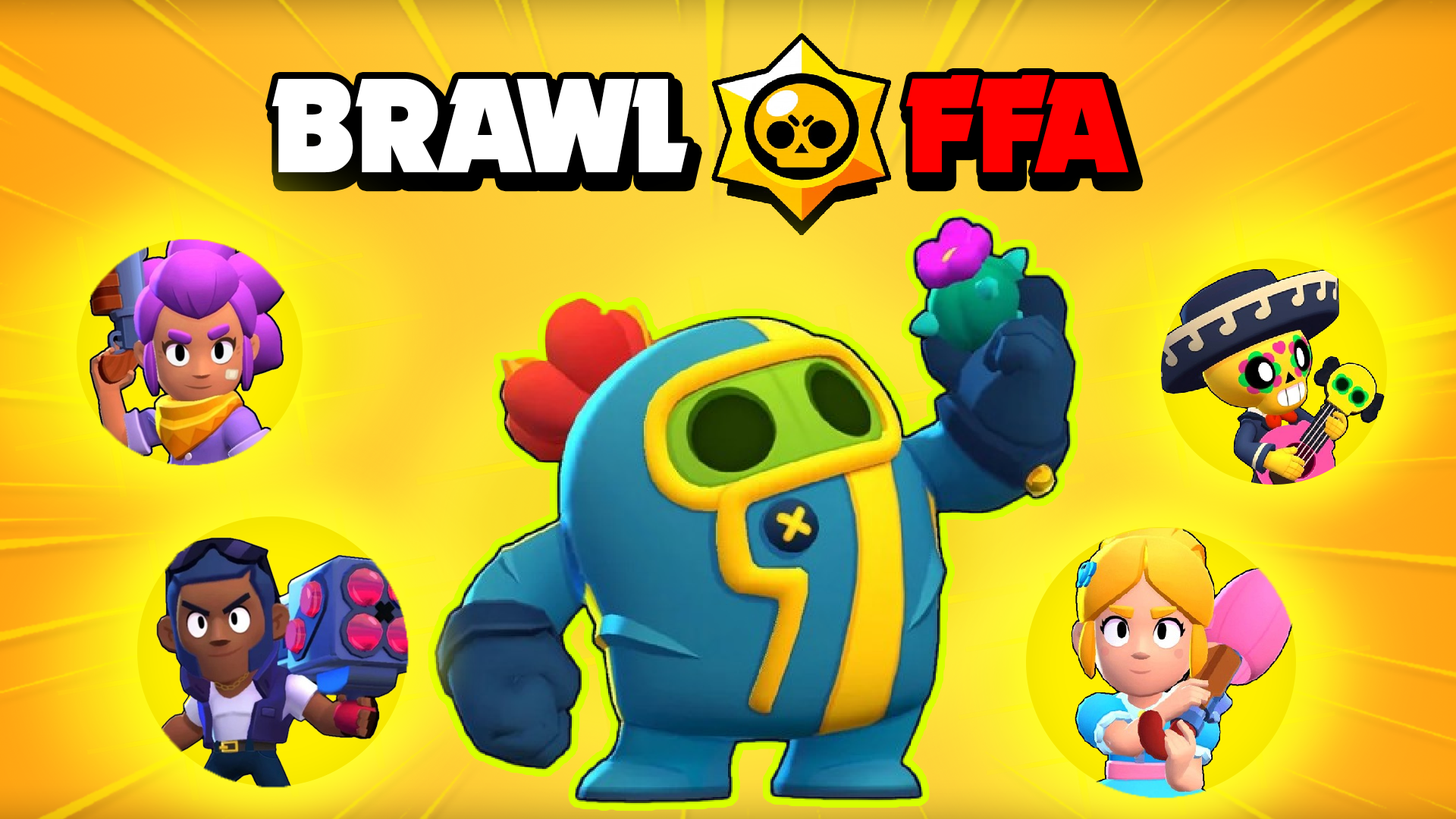
<style>
.page{position:relative;width:1456px;height:819px}
.page>*{position:absolute;margin:0}
.t1{font:136.5px "Nougat-ExtraBlack";color:#ffffff}
.t2{font:136.5px "Nougat-ExtraBlack";color:#ff0000}
</style>
<div class="page">
<p class="t1" style="left:271px;top:75px;width:858px;height:98px">BRAWL   <span class="t2">FFA</span></p>
</div>
